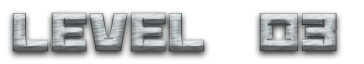
<style>
.page{position:relative;width:364px;height:64px;background:#ffffff}
.page>*{position:absolute;margin:0}
.t1{font:60px "BananaBrick"}
</style>
<div class="page">
<p class="t1" style="left:12px;top:12px;width:325px;height:40px">Level  03</p>
</div>
